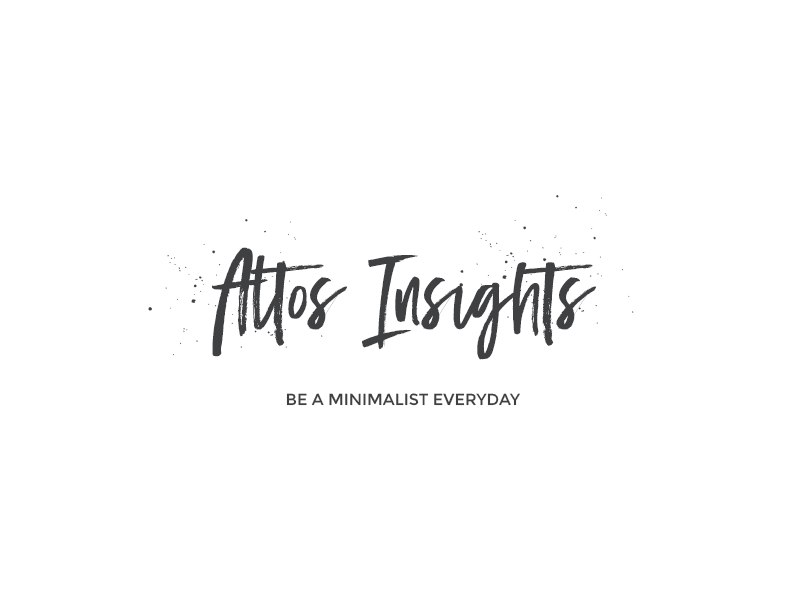
<style>
.page{position:relative;width:800px;height:600px;background:#ffffff}
.page>*{position:absolute;margin:0}
.t1{font:90px "BlackDiamond";color:#3e4041}
.t2{font:16px "Montserrat-Regular";color:#3e4041}
</style>
<div class="page">
<p class="t1" style="left:212px;top:247px;width:385px;height:113px">Altos Insights</p>
<p class="t2" style="left:286px;top:393px;width:234px;height:13px">BE A MINIMALIST EVERYDAY</p>
</div>
